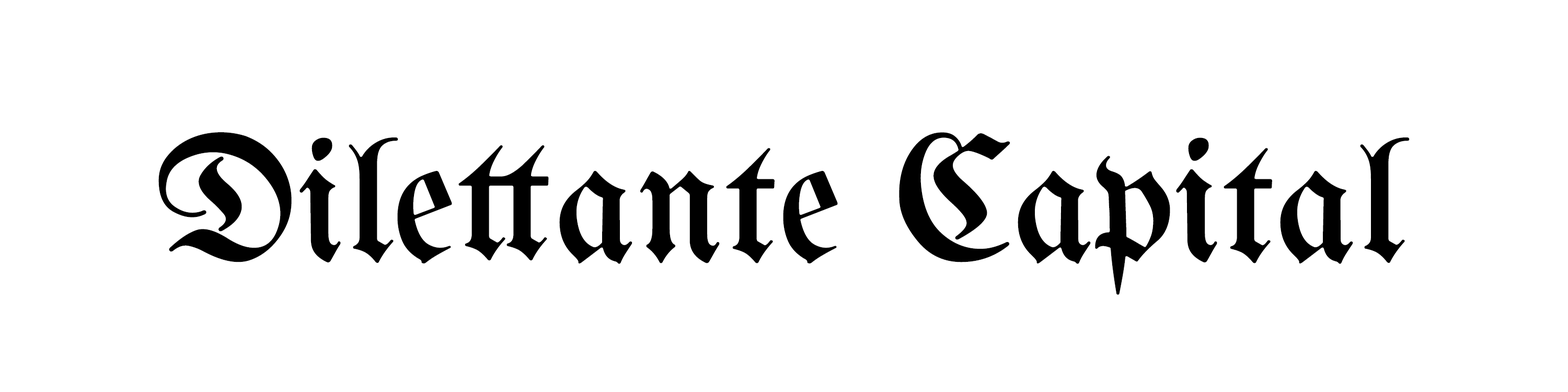
<style>
.page{position:relative;width:1568px;height:392px;background:#ffffff}
.page>*{position:absolute;margin:0}
.t1{font:175.4px "UnifrakturMaguntia";color:#000000}
</style>
<div class="page">
<p class="t1" style="left:158px;top:132px;width:1252px;height:163px">Dilettante Capital</p>
</div>
